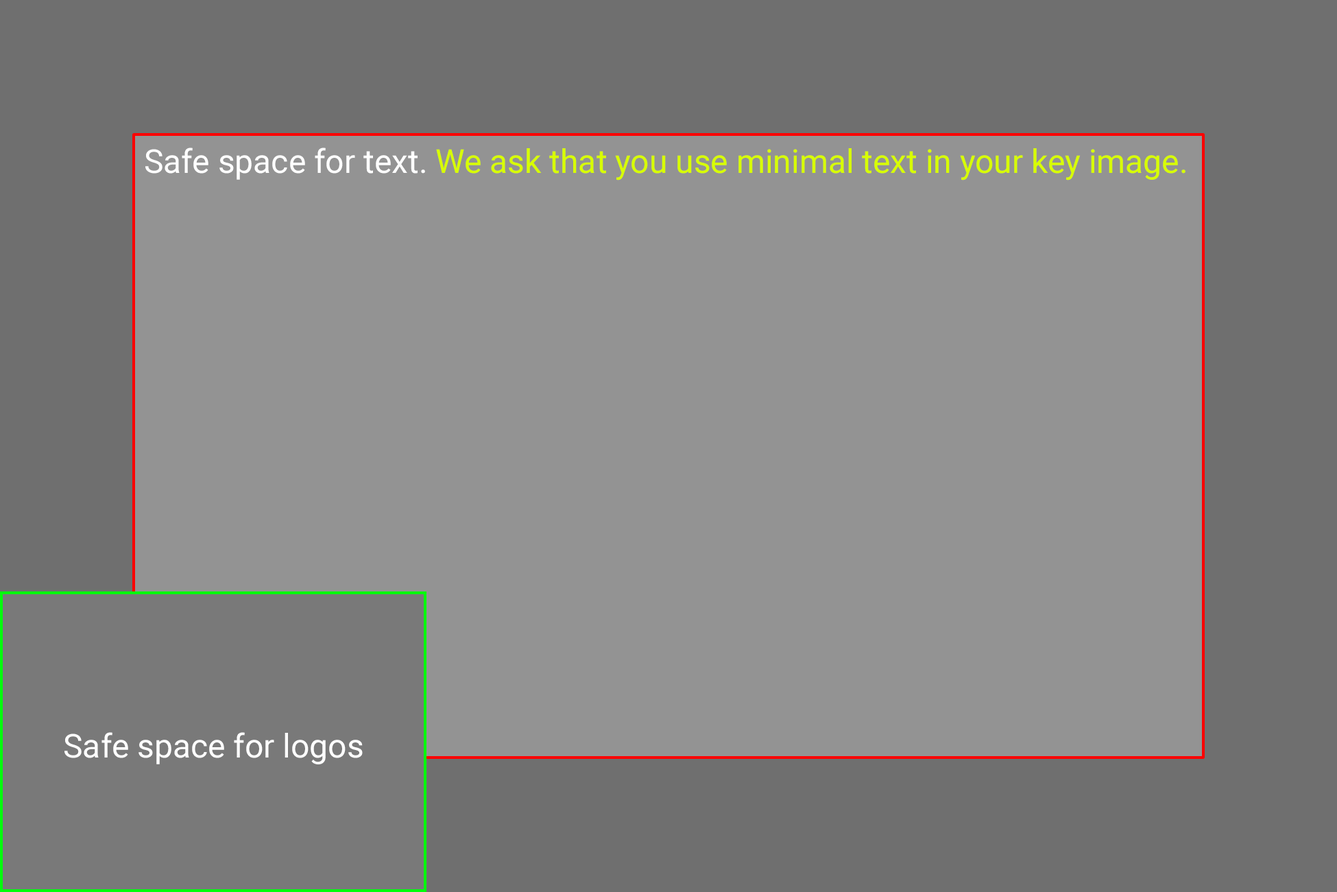
<style>
.page{position:relative;width:1337px;height:892px;background:#939393}
.page>*{position:absolute;margin:0}
.t1{font:32.9px "Roboto-Regular";color:#d8ff00}
.t2{font:32.9px "Roboto-Regular";color:#ffffff}
</style>
<div class="page">
<p class="t1" style="left:145px;top:147px;width:1041px;height:33px"><span class="t2">Safe space for text. </span>We ask that you use minimal text in your key image.</p>
<p class="t2" style="left:64px;top:732px;width:299px;height:32px">Safe space for logos</p>
</div>
